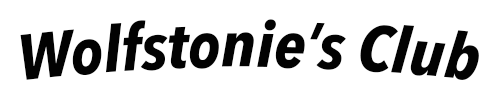
<style>
.page{position:relative;width:500px;height:100px;background:#ffffff}
.page>*{position:absolute;margin:0}
.t1{font:63.4px "AvenirNextCondensed-BoldItalic";color:#020202;scale:1.04 1}
</style>
<div class="page">
<p class="t1" style="left:20px;top:19px;width:459px;height:61px">Wolfstonie’s Club</p>
</div>
